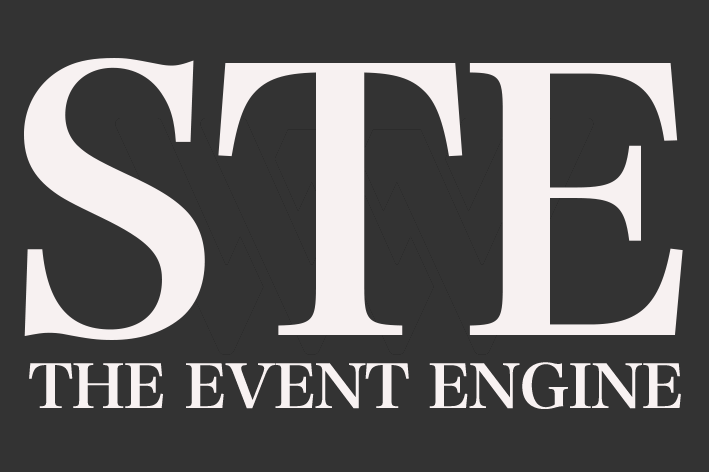
<style>
.page{position:relative;width:709px;height:472px;background:#333333}
.page>*{position:absolute;margin:0}
.t1{font:363.6px "HiraMinProN-W6";letter-spacing:-0.025em;color:#f7f1f1}
.t2{font:59.7px "HiraMinProN-W6";letter-spacing:-0.025em;color:#f8f2f2;scale:1.08 1}
</style>
<div class="page">
<p class="t1" style="left:24px;top:58px;width:659px;height:282px">STE</p>
<p class="t2" style="left:29px;top:362px;width:652px;height:47px">THE EVENT ENGINE</p>
</div>
